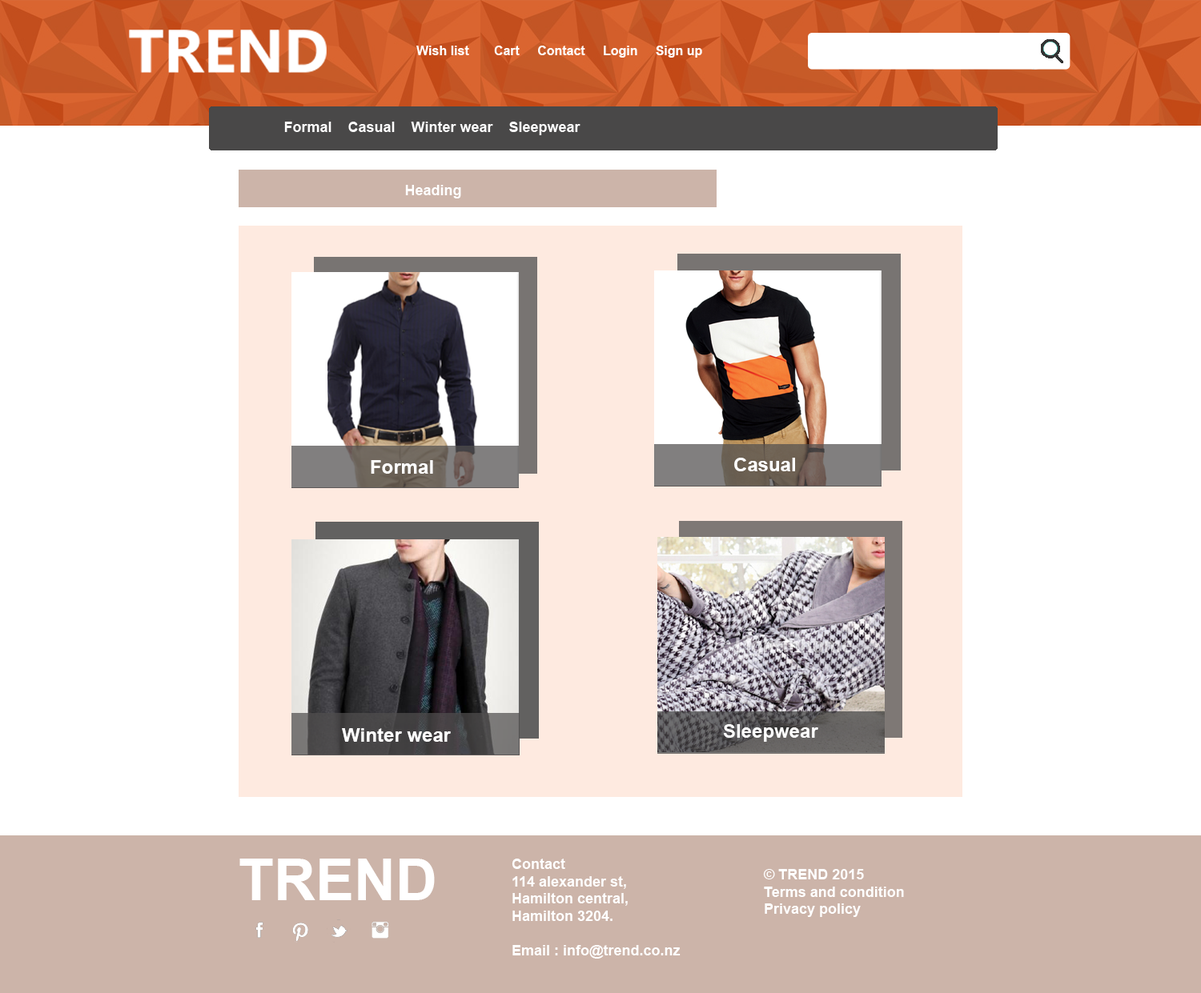
<style>
.page{position:relative;width:1201px;height:993px;background:#ffffff}
.page>*{position:absolute;margin:0}
.t1{font:12.8px "Arial-BoldMT";color:#ffffff}
.t2{font:14.4px "Arial-BoldMT";color:#fdfdfd}
.t3{font:14.4px "Arial-BoldMT";color:#ffffff}
.t4{font:19.2px "Arial-BoldMT";color:#ffffff}
.t5{font:57.6px "Arial-BoldMT";color:#ffffff}
</style>
<div class="page">
<p class="t1" style="left:416px;top:46px;width:286px;height:12px">Wish list       Cart     Contact     Login     Sign up</p>
<p class="t2" style="left:284px;top:122px;width:296px;height:13px">Formal    Casual    Winter wear    Sleepwear</p>
<p class="t3" style="left:405px;top:185px;width:56px;height:13px">Heading</p>
<p class="t4" style="left:371px;top:460px;width:62px;height:14px">Formal</p>
<p class="t4" style="left:734px;top:458px;width:61px;height:13px">Casual</p>
<p class="t4" style="left:723px;top:724px;width:95px;height:18px">Sleepwear</p>
<p class="t4" style="left:342px;top:728px;width:109px;height:14px">Winter wear</p>
<p class="t5" style="left:239px;top:859px;width:196px;height:41px">TREND</p>
<p class="t3" style="left:511px;top:859px;width:169px;height:100px">Contact<br>114 alexander st,<br>Hamilton central,<br>Hamilton 3204.<br><br>Email : info@trend.co.nz<br>Phone : 0800 555 666</p>
<p class="t3" style="left:763px;top:869px;width:141px;height:48px">© TREND 2015<br>Terms and condition <br>Privacy policy</p>
</div>
